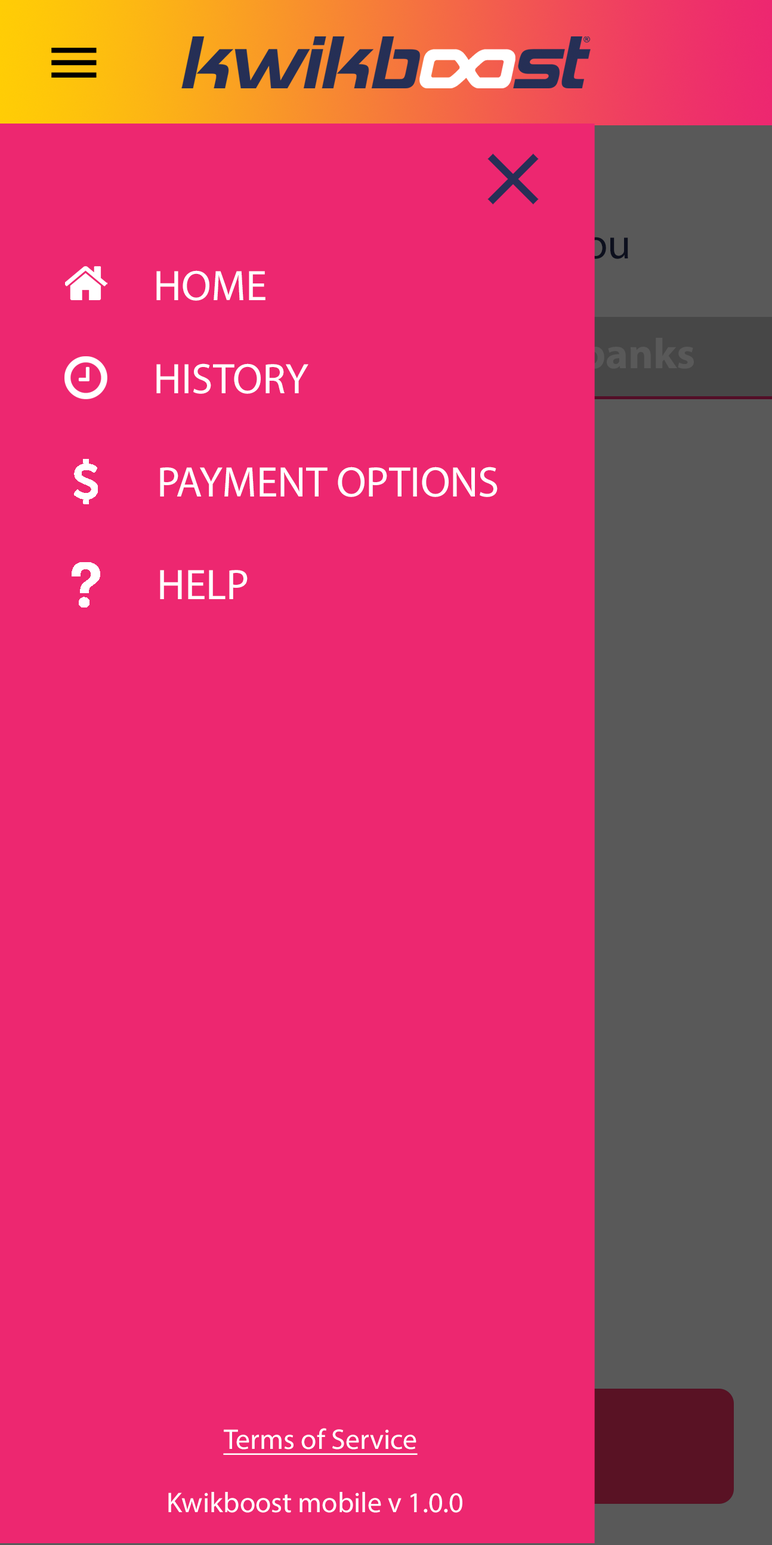
<style>
.page{position:relative;width:772px;height:1545px;background:#ed2770}
.page>*{position:absolute;margin:0}
.t1{font:43px "MyriadPro-Regular";color:#ffffff}
.t2{font:28.6px "MyriadPro-Regular";color:#ffffff;text-decoration:underline}
.t3{font:28.6px "MyriadPro-Regular";color:#ffffff}
</style>
<div class="page">
<p class="t1" style="left:156px;top:270px;width:109px;height:31px">HOME</p>
<p class="t1" style="left:156px;top:363px;width:152px;height:31px">HISTORY</p>
<p class="t1" style="left:160px;top:467px;width:338px;height:30px">PAYMENT OPTIONS</p>
<p class="t1" style="left:160px;top:570px;width:88px;height:29px">HELP</p>
<p class="t2" style="left:223px;top:1428px;width:195px;height:27px">Terms of Service</p>
<p class="t3" style="left:168px;top:1492px;width:294px;height:20px">Kwikboost mobile v 1.0.0</p>
</div>
